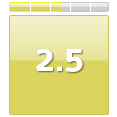
<style>
.page{position:relative;width:117px;height:117px;background:#dad35d}
.page>*{position:absolute;margin:0}
.t1{font:36px "Colaborate-Bold";color:#ffffff;text-transform:uppercase}
</style>
<div class="page">
<p class="t1" style="left:35px;top:49px;width:48px;height:23px">2.5</p>
</div>
